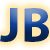
<style>
.page{position:relative;width:50px;height:50px;background:#fee8ad}
.page>*{position:absolute;margin:0}
.t1{font:50px "MyriadPro-Bold"}
</style>
<div class="page">
<p class="t1" style="left:0px;top:8px;width:49px;height:34px">JB</p>
</div>
